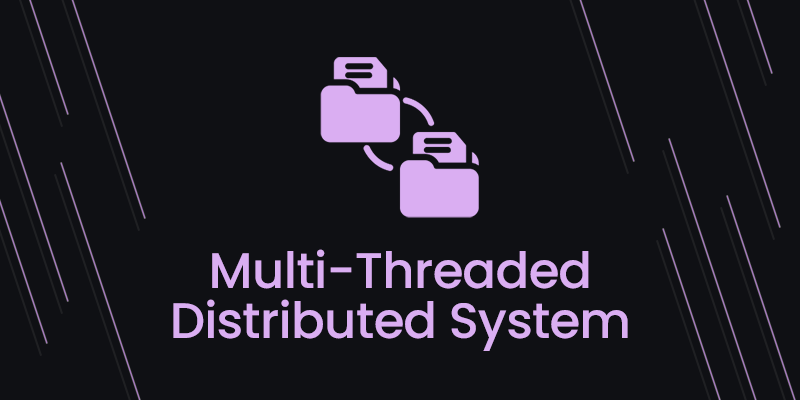
<style>
.page{position:relative;width:800px;height:400px;background:#0f1014}
.page>*{position:absolute;margin:0}
.t1{font:49.9px/49.9px "Poppins-Medium";letter-spacing:-0.016em;color:#daaef2}
</style>
<div class="page">
<p class="t1" style="left:173px;top:249px;width:455px;height:102px;text-align:center">Multi-Threaded<br>Distributed System</p>
</div>
